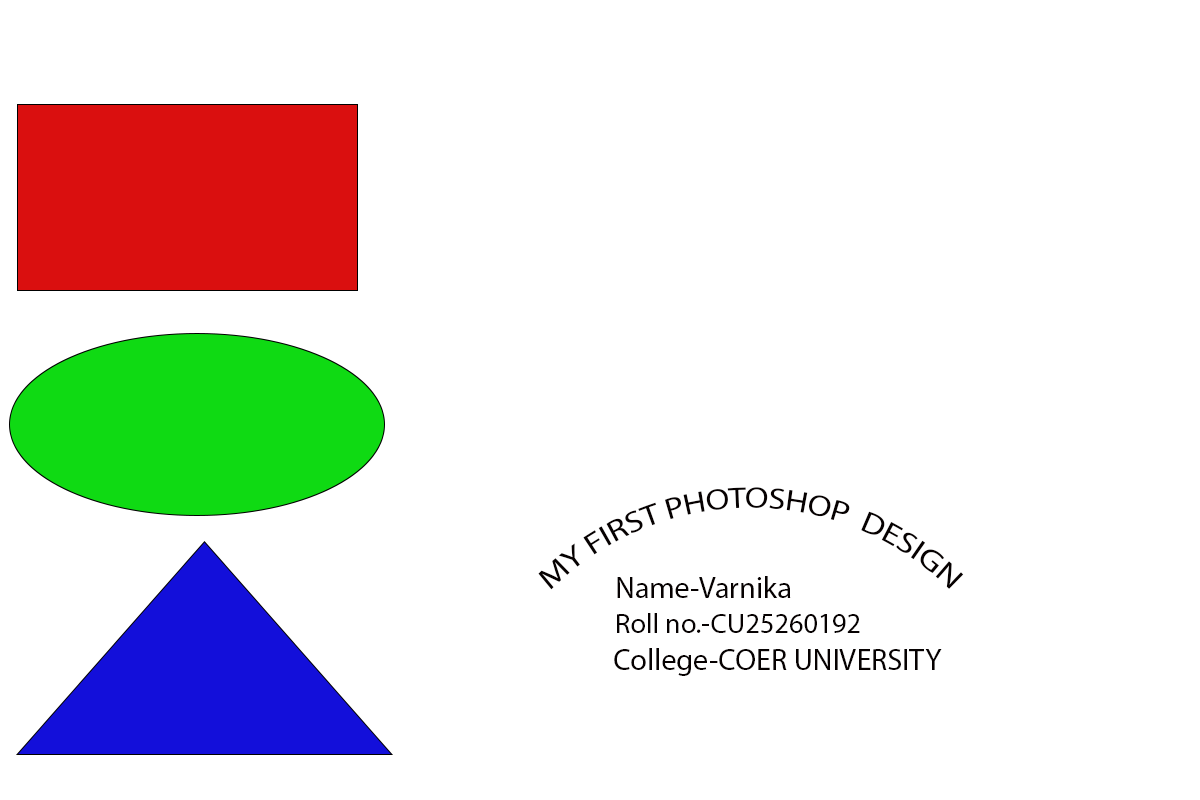
<style>
.page{position:relative;width:1200px;height:800px;background:#ffffff}
.page>*{position:absolute;margin:0}
.t1{font:30px "MyriadPro-Regular";color:#060101}
.t2{font:28.3px "MyriadPro-Regular";color:#060101}
</style>
<div class="page">
<p class="t1" style="left:538px;top:487px;width:426px;height:103px">MY FIRST PHOTOSHOP  DESIGN</p>
<p class="t1" style="left:617px;top:576px;width:174px;height:22px">Name-Varnika</p>
<p class="t2" style="left:617px;top:613px;width:243px;height:20px">Roll no.-CU25260192</p>
<p class="t1" style="left:614px;top:648px;width:328px;height:28px">College-COER UNIVERSITY</p>
</div>
